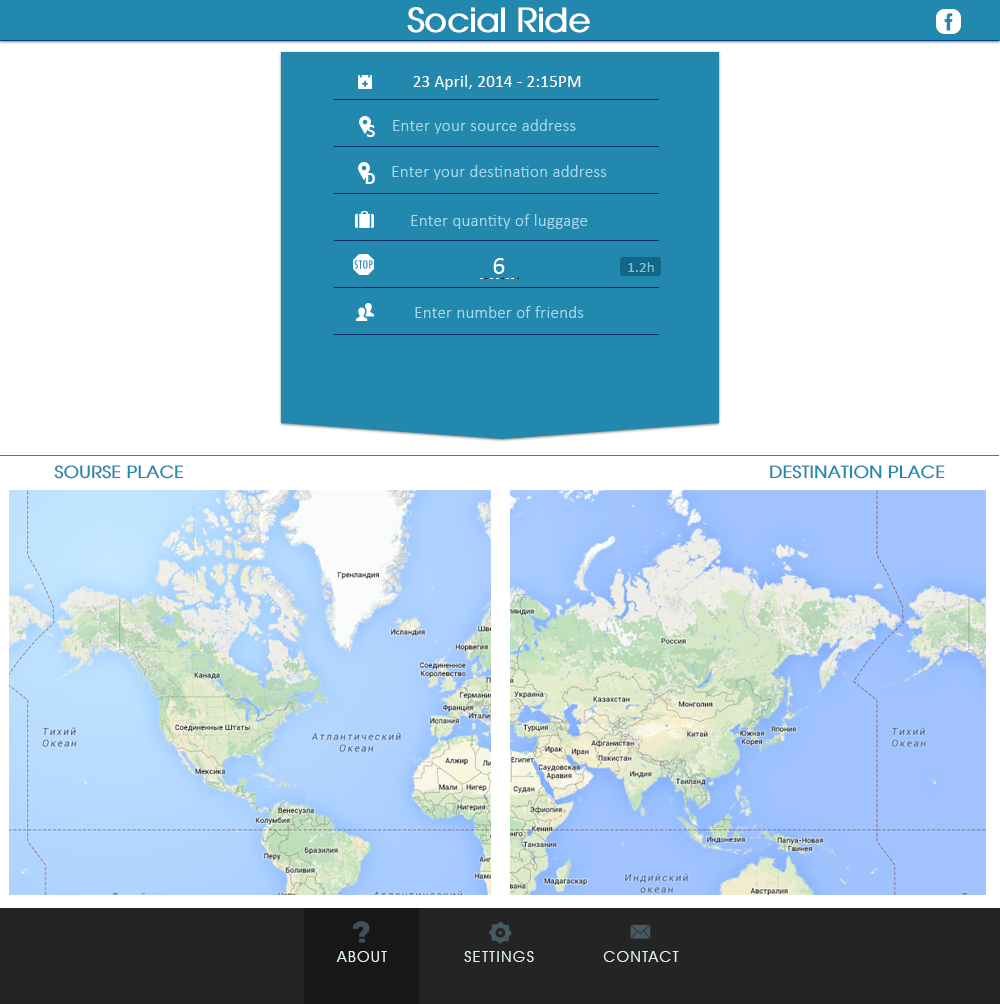
<style>
.page{position:relative;width:1000px;height:1004px;background:#ffffff}
.page>*{position:absolute;margin:0}
.t1{font:33.3px "AvantGarde-Book-Bold";letter-spacing:-0.025em;color:#ffffff}
.t2{font:16.7px "Calibri";letter-spacing:0.025em;color:#fefefe}
.t3{font:25px "Calibri";color:#fefefe}
.t4{font:16.7px "Calibri-Light";letter-spacing:0.025em;color:#a2d9ed}
.t5{font:16.7px "Calibri-Bold";color:#fefefe}
.t6{font:25px "Calibri";color:#ffffff}
.t7{font:15.4px "Calibri";color:#7ec5df}
.t8{font:16.8px "AvantGarde-Book-Bold";color:#2388ad}
.t9{font:15.4px "AvantGardeITCbyBT-Book";letter-spacing:0.1em;color:#e1f0f5}
</style>
<div class="page">
<p class="t1" style="left:407px;top:7px;width:183px;height:26px">Social Ride</p>
<p class="t2" style="left:413px;top:75px;width:168px;height:15px">23 April, 2014 - 2:15PM</p>
<p class="t3" style="left:366px;top:125px;width:9px;height:12px">s</p>
<p class="t4" style="left:393px;top:119px;width:183px;height:15px">Enter your source address</p>
<p class="t5" style="left:365px;top:173px;width:10px;height:11px">D</p>
<p class="t4" style="left:392px;top:165px;width:215px;height:15px">Enter your destination address</p>
<p class="t4" style="left:411px;top:214px;width:177px;height:15px">Enter quantity of luggage</p>
<p class="t6" style="left:493px;top:258px;width:12px;height:16px">6</p>
<p class="t7" style="left:628px;top:262px;width:26px;height:10px">1.2h</p>
<p class="t4" style="left:415px;top:306px;width:169px;height:12px">Enter number of friends</p>
<p class="t8" style="left:54px;top:465px;width:130px;height:14px">SOURSE PLACE</p>
<p class="t8" style="left:770px;top:465px;width:175px;height:14px">DESTINATION PLACE</p>
<p class="t9" style="left:336px;top:951px;width:51px;height:11px">ABOUT</p>
<p class="t9" style="left:464px;top:951px;width:70px;height:11px">SETTINGS</p>
<p class="t9" style="left:603px;top:951px;width:76px;height:11px">CONTACT</p>
</div>
